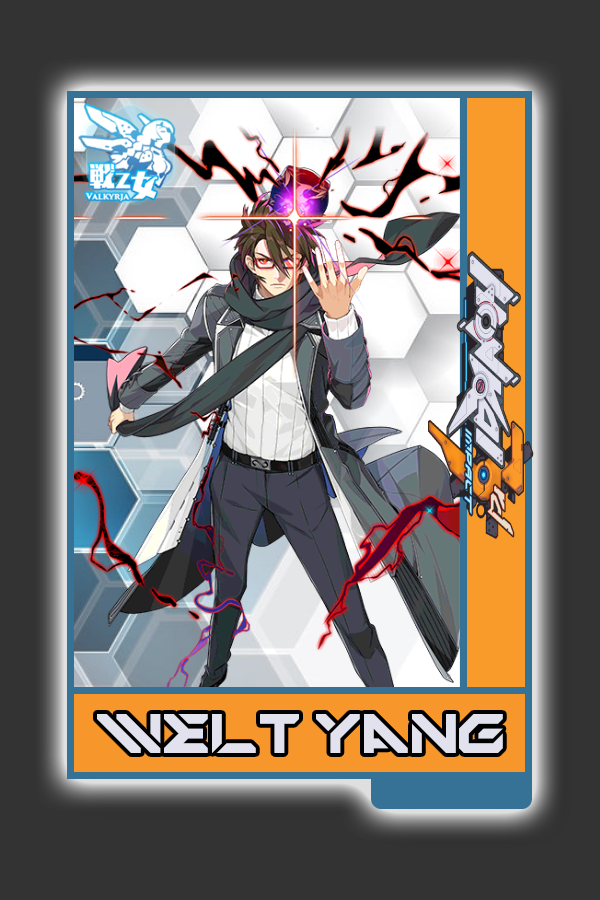
<style>
.page{position:relative;width:600px;height:900px;background:#333333}
.page>*{position:absolute;margin:0}
.t1{font:39px "Mechsuit";color:#e2e2ef}
</style>
<div class="page">
<p class="t1" style="left:97px;top:714px;width:406px;height:39px">Welt Yang</p>
</div>
